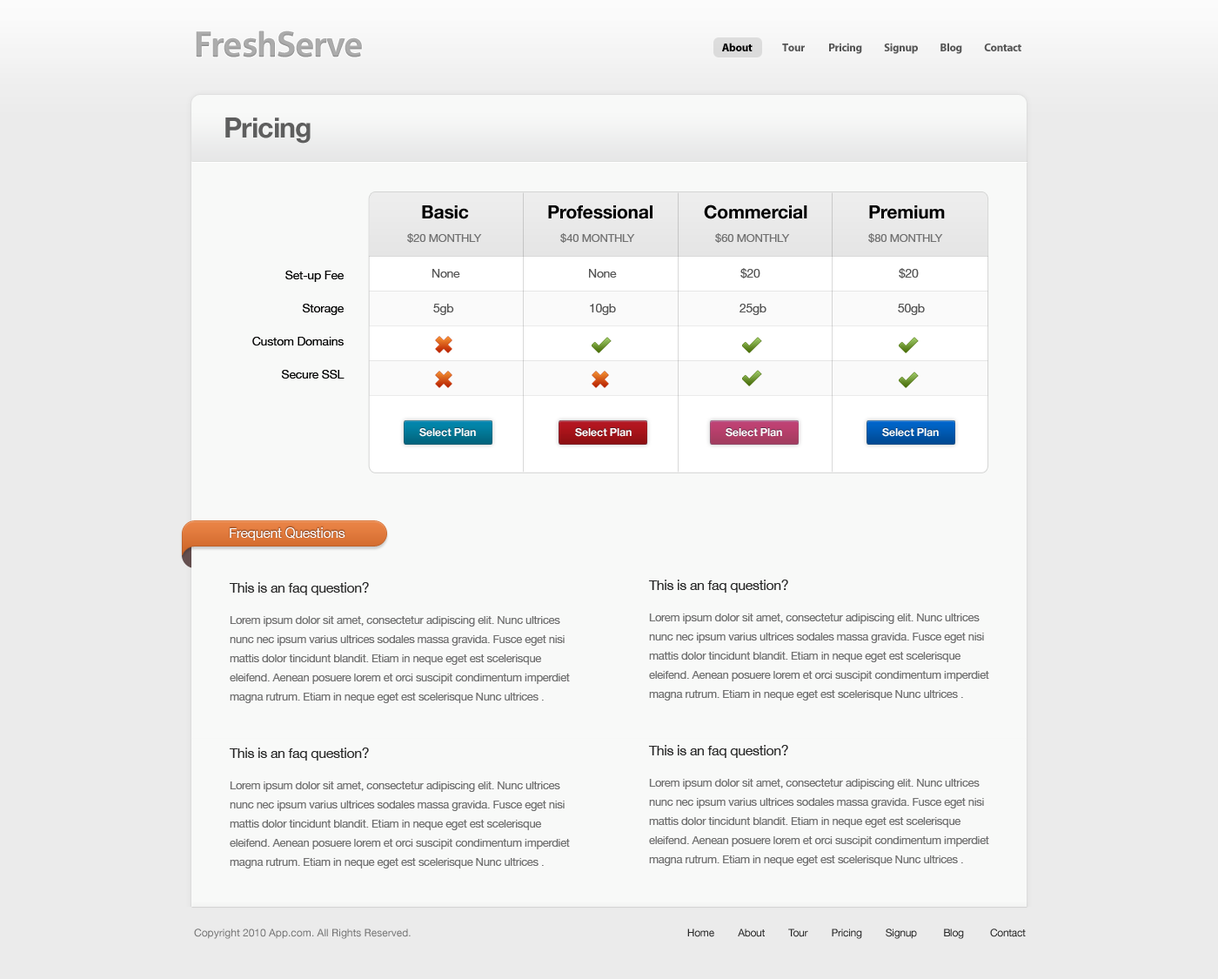
<style>
.page{position:relative;width:1218px;height:979px;background:#ebebeb}
.page>*{position:absolute;margin:0}
.t1{font:34.8px "Aller-Bold";letter-spacing:-0.025em;color:#acacac}
.t2{font:11.3px "MyriadPro-Bold";letter-spacing:-0.025em;color:#555555}
.t3{font:11.3px "MyriadPro-Bold";letter-spacing:-0.025em;color:#000000}
.t4{font:27.8px "HelveticaNeue-Bold";letter-spacing:-0.025em;color:#5e5e5e}
.t5{font:18.3px "HelveticaNeue-Bold";letter-spacing:-0.01em;color:#000000}
.t6{font:11.3px "HelveticaNeue";letter-spacing:-0.015em;color:#707070}
.t7{font:12.2px "HelveticaNeue";letter-spacing:-0.025em;color:#555555}
.t8{font:12.2px/33.1px "HelveticaNeue";letter-spacing:-0.015em;color:#000000}
.t9{font:11px "HelveticaNeue-Bold";letter-spacing:-0.015em;color:#ffffff}
.t10{font:13.9px "HelveticaNeue";letter-spacing:-0.025em;color:#ffffff}
.t11{font:11.3px/19.1px "HelveticaNeue";letter-spacing:-0.025em;color:#707070}
.t12{font:13.9px/15.7px "HelveticaNeue";letter-spacing:-0.025em;color:#252525}
.t13{font:11.3px/15.7px "HelveticaNeue";letter-spacing:-0.025em;color:#707070}
.t14{font:10.4px "HelveticaNeue";color:#757575}
.t15{font:10.4px "HelveticaNeue";letter-spacing:-0.025em;color:#2a2a2a}
</style>
<div class="page">
<p class="t1" style="left:196px;top:30px;width:166px;height:27px">FreshServe</p>
<p class="t2" style="left:722px;top:43px;width:300px;height:11px"><span class="t3">About               </span>Tour            Pricing           Signup           Blog           Contact</p>
<p class="t4" style="left:225px;top:117px;width:86px;height:27px">Pricing</p>
<p class="t5" style="left:422px;top:205px;width:47px;height:14px">Basic</p>
<p class="t5" style="left:548px;top:205px;width:105px;height:14px">Professional</p>
<p class="t5" style="left:704px;top:204px;width:103px;height:15px">Commercial</p>
<p class="t5" style="left:869px;top:205px;width:76px;height:14px">Premium</p>
<p class="t6" style="left:407px;top:233px;width:75px;height:10px">$20 MONTHLY</p>
<p class="t6" style="left:560px;top:233px;width:75px;height:10px">$40 MONTHLY</p>
<p class="t6" style="left:715px;top:233px;width:75px;height:10px">$60 MONTHLY</p>
<p class="t6" style="left:868px;top:233px;width:75px;height:10px">$80 MONTHLY</p>
<p class="t7" style="left:432px;top:269px;width:28px;height:9px">None</p>
<p class="t7" style="left:589px;top:269px;width:28px;height:9px">None</p>
<p class="t7" style="left:740px;top:268px;width:20px;height:10px">$20</p>
<p class="t7" style="left:899px;top:268px;width:20px;height:10px">$20</p>
<p class="t8" style="left:252px;top:271px;width:93px;height:108px;text-align:right">Set-up Fee<br>Storage<br>Custom Domains<br>Secure SSL</p>
<p class="t7" style="left:433px;top:304px;width:21px;height:11px">5gb</p>
<p class="t7" style="left:590px;top:304px;width:26px;height:11px">10gb</p>
<p class="t7" style="left:740px;top:304px;width:27px;height:11px">25gb</p>
<p class="t7" style="left:898px;top:304px;width:27px;height:11px">50gb</p>
<p class="t9" style="left:419px;top:428px;width:57px;height:9px">Select Plan</p>
<p class="t9" style="left:575px;top:428px;width:57px;height:9px">Select Plan</p>
<p class="t9" style="left:726px;top:428px;width:56px;height:9px">Select Plan</p>
<p class="t9" style="left:882px;top:428px;width:57px;height:9px">Select Plan</p>
<p class="t10" style="left:230px;top:527px;width:115px;height:13px">Frequent Questions</p>
<p class="t11" style="left:648px;top:579px;width:341px;height:121px"><span class="t12">This is an faq question?<br><br></span><span class="t13">Lorem ipsum dolor sit amet, consectetur adipiscing elit. Nunc ultrices </span>nunc nec ipsum varius ultrices sodales massa gravida. Fusce eget nisi mattis dolor tincidunt blandit. Etiam in neque eget est scelerisque eleifend. Aenean posuere lorem et orci suscipit condimentum imperdiet magna rutrum. Etiam in neque eget est scelerisque <span class="t13">Nunc ultrices .</span></p>
<p class="t11" style="left:229px;top:582px;width:341px;height:121px"><span class="t12">This is an faq question?<br><br></span><span class="t13">Lorem ipsum dolor sit amet, consectetur adipiscing elit. Nunc ultrices </span>nunc nec ipsum varius ultrices sodales massa gravida. Fusce eget nisi mattis dolor tincidunt blandit. Etiam in neque eget est scelerisque eleifend. Aenean posuere lorem et orci suscipit condimentum imperdiet magna rutrum. Etiam in neque eget est scelerisque <span class="t13">Nunc ultrices .</span></p>
<p class="t11" style="left:229px;top:747px;width:341px;height:121px"><span class="t12">This is an faq question?<br><br></span><span class="t13">Lorem ipsum dolor sit amet, consectetur adipiscing elit. Nunc ultrices </span>nunc nec ipsum varius ultrices sodales massa gravida. Fusce eget nisi mattis dolor tincidunt blandit. Etiam in neque eget est scelerisque eleifend. Aenean posuere lorem et orci suscipit condimentum imperdiet magna rutrum. Etiam in neque eget est scelerisque <span class="t13">Nunc ultrices .</span></p>
<p class="t11" style="left:648px;top:745px;width:341px;height:121px"><span class="t12">This is an faq question?<br><br></span><span class="t13">Lorem ipsum dolor sit amet, consectetur adipiscing elit. Nunc ultrices </span>nunc nec ipsum varius ultrices sodales massa gravida. Fusce eget nisi mattis dolor tincidunt blandit. Etiam in neque eget est scelerisque eleifend. Aenean posuere lorem et orci suscipit condimentum imperdiet magna rutrum. Etiam in neque eget est scelerisque <span class="t13">Nunc ultrices .</span></p>
<p class="t14" style="left:194px;top:928px;width:217px;height:11px">Copyright 2010 App.com. All Rights Reserved.</p>
<p class="t15" style="left:687px;top:928px;width:339px;height:11px">Home         About         Tour         Pricing         Signup          Blog          Contact</p>
</div>
